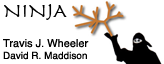
<style>
.page{position:relative;width:164px;height:64px;background:#ffffff}
.page>*{position:absolute;margin:0}
.t1{font:20px "Herculanum";color:#000000}
.t2{font:11px "Helvetica";color:#000000}
.t3{font:10px "Helvetica";color:#000000}
</style>
<div class="page">
<p class="t1" style="left:4px;top:4px;width:63px;height:16px">NINJA</p>
<p class="t2" style="left:3px;top:39px;width:86px;height:21px">Travis J. Wheeler<br><span class="t3">David R. Maddison</span></p>
</div>
